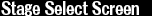
<style>
.page{position:relative;width:152px;height:16px;background:#000000}
.page>*{position:absolute;margin:0}
.t1{font:17.2px "FolkPro-Heavy";letter-spacing:-0.022em;color:#ffffff;scale:0.77 1}
</style>
<div class="page">
<p class="t1" style="left:1px;top:1px;width:138px;height:17px">Stage Select Screen</p>
<p class="t1" style="left:1px;top:0px;width:138px;height:17px">Stage Select Screen</p>
</div>
